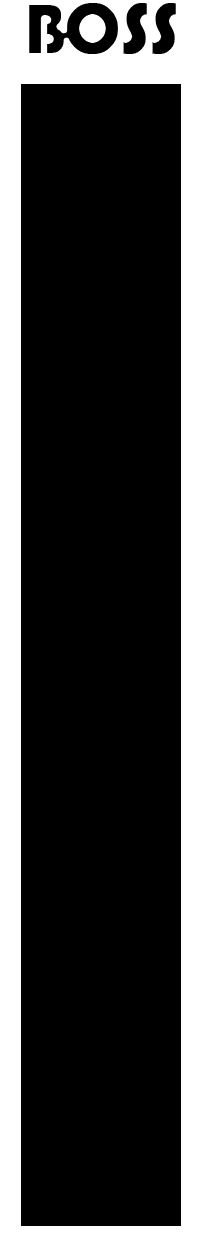
<style>
.page{position:relative;width:202px;height:1247px;background:#000000}
.page>*{position:absolute;margin:0}
.t1{font:79.9px "Bauhaus93";letter-spacing:-0.07em;color:#000000;font-weight:bold}
</style>
<div class="page">
<p class="t1" style="left:26px;top:0px;width:153px;height:57px">BOSS</p>
</div>
